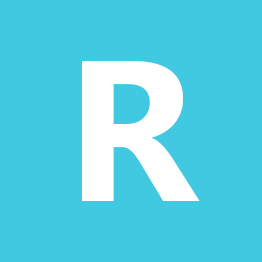
<style>
.page{position:relative;width:262px;height:262px;background:#41c9e2}
.page>*{position:absolute;margin:0}
.t1{font:200px "MicrosoftNewTaiLue-Bold";color:#ffffff}
</style>
<div class="page">
<p class="t1" style="left:82px;top:61px;width:118px;height:140px">R</p>
</div>
